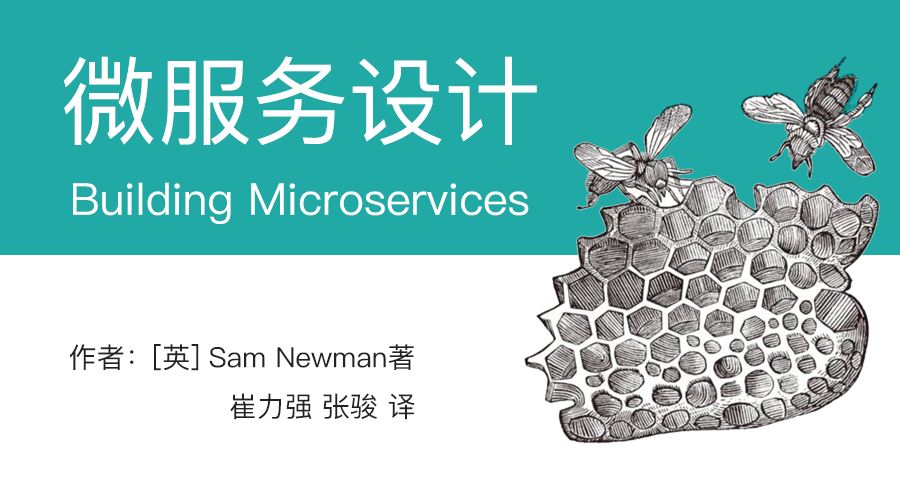
<style>
.page{position:relative;width:900px;height:500px;background:#20a9a5}
.page>*{position:absolute;margin:0}
.t1{font:96px "PingFangSC-Regular";color:#ffffff}
.t2{font:44px "PingFangSC-Regular";color:#ffffff}
.t3{font:28px "PingFangSC-Regular";color:#222222}
</style>
<div class="page">
<p class="t1" style="left:63px;top:56px;width:474px;height:90px">微服务设计</p>
<p class="t2" style="left:73px;top:182px;width:456px;height:42px">Building Microservices</p>
<p class="t3" style="left:69px;top:344px;width:346px;height:76px;text-align:right">作者：[英] Sam Newman著<br>崔力强 张骏 译</p>
</div>
